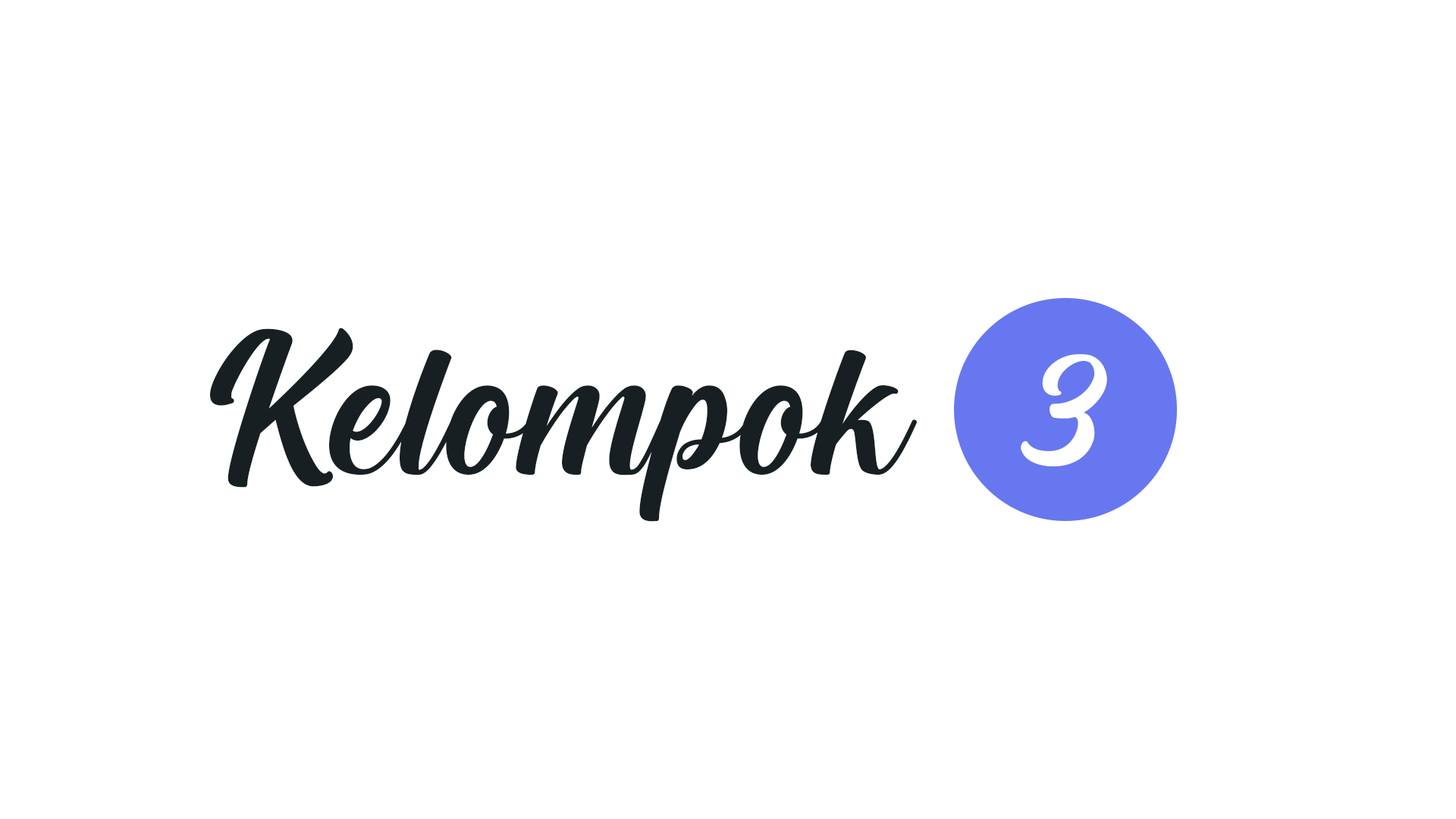
<style>
.page{position:relative;width:1456px;height:819px;background:#ffffff}
.page>*{position:absolute;margin:0}
.t1{font:252.8px "CreamCake";color:#171f22}
.t2{font:227.5px "CreamCake";color:#ffffff}
</style>
<div class="page">
<p class="t1" style="left:210px;top:328px;width:707px;height:194px">Kelompok</p>
<p class="t2" style="left:1021px;top:354px;width:86px;height:112px">3</p>
</div>
